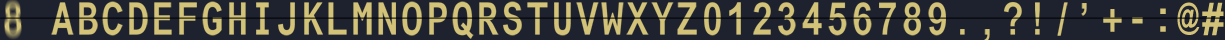
<style>
.page{position:relative;width:1225px;height:40px;background:#1e212e}
.page>*{position:absolute;margin:0}
.t1{font:45px "ArialMonoMTPro-Bold";color:#d2c378;scale:0.8 1}
.t2{font:35px "ArialNarrow-Bold";letter-spacing:-0.1em;color:#d2c378;scale:0.8 1}
.t3{font:44px "Arial-BoldMT";color:#d2c378;scale:0.91 1}
.t4{font:60px "AppleSymbols";color:#d2c378}
</style>
<div class="page">
<p class="t1" style="left:51px;top:2px;width:23px;height:33px">A</p>
<p class="t1" style="left:79px;top:2px;width:19px;height:33px">B</p>
<p class="t1" style="left:102px;top:1px;width:21px;height:35px">C</p>
<p class="t1" style="left:129px;top:2px;width:19px;height:33px">D</p>
<p class="t1" style="left:154px;top:2px;width:18px;height:33px">E</p>
<p class="t1" style="left:179px;top:2px;width:18px;height:33px">F</p>
<p class="t1" style="left:202px;top:1px;width:20px;height:35px">G</p>
<p class="t1" style="left:229px;top:2px;width:17px;height:33px">H</p>
<p class="t1" style="left:256px;top:2px;width:13px;height:33px">I</p>
<p class="t1" style="left:278px;top:2px;width:17px;height:34px">J</p>
<p class="t1" style="left:304px;top:2px;width:19px;height:33px">K</p>
<p class="t1" style="left:328px;top:2px;width:19px;height:33px">L</p>
<p class="t1" style="left:353px;top:2px;width:19px;height:33px">M</p>
<p class="t1" style="left:378px;top:2px;width:18px;height:33px">N</p>
<p class="t1" style="left:402px;top:1px;width:20px;height:35px">O</p>
<p class="t1" style="left:429px;top:2px;width:18px;height:33px">P</p>
<p class="t1" style="left:452px;top:1px;width:22px;height:38px">Q</p>
<p class="t1" style="left:479px;top:2px;width:20px;height:33px">R</p>
<p class="t1" style="left:503px;top:1px;width:19px;height:35px">S</p>
<p class="t1" style="left:527px;top:2px;width:21px;height:33px">T</p>
<p class="t1" style="left:554px;top:2px;width:17px;height:34px">U</p>
<p class="t1" style="left:576px;top:2px;width:23px;height:33px">V</p>
<p class="t1" style="left:601px;top:2px;width:23px;height:33px">W</p>
<p class="t1" style="left:626px;top:2px;width:23px;height:33px">X</p>
<p class="t1" style="left:651px;top:2px;width:23px;height:33px">Y</p>
<p class="t1" style="left:677px;top:2px;width:20px;height:33px">Z</p>
<p class="t1" style="left:704px;top:2px;width:17px;height:34px">0</p>
<p class="t1" style="left:729px;top:2px;width:12px;height:33px">1</p>
<p class="t1" style="left:753px;top:2px;width:18px;height:33px">2</p>
<p class="t1" style="left:778px;top:2px;width:18px;height:34px">3</p>
<p class="t1" style="left:802px;top:2px;width:20px;height:33px">4</p>
<p class="t1" style="left:828px;top:2px;width:19px;height:34px">5</p>
<p class="t1" style="left:853px;top:2px;width:19px;height:34px">6</p>
<p class="t1" style="left:879px;top:2px;width:17px;height:33px">7</p>
<p class="t1" style="left:903px;top:2px;width:18px;height:34px">8</p>
<p class="t1" style="left:928px;top:2px;width:18px;height:34px">9</p>
<p class="t1" style="left:1004px;top:2px;width:18px;height:33px">?</p>
<p class="t1" style="left:1035px;top:2px;width:5px;height:33px">!</p>
<p class="t1" style="left:1057px;top:2px;width:11px;height:34px">/</p>
<p class="t1" style="left:1081px;top:3px;width:6px;height:13px">,</p>
<p class="t2" style="left:1177px;top:2px;width:23px;height:33px">@</p>
<p class="t3" style="left:1202px;top:2px;width:22px;height:34px">#</p>
<p class="t1" style="left:1103px;top:9px;width:19px;height:23px">+</p>
<p class="t1" style="left:1132px;top:17px;width:11px;height:7px">-</p>
<p class="t4" style="left:1160px;top:8px;width:6px;height:24px">:</p>
<p class="t1" style="left:960px;top:29px;width:5px;height:6px">.</p>
<p class="t1" style="left:984px;top:29px;width:6px;height:13px">,</p>
</div>
